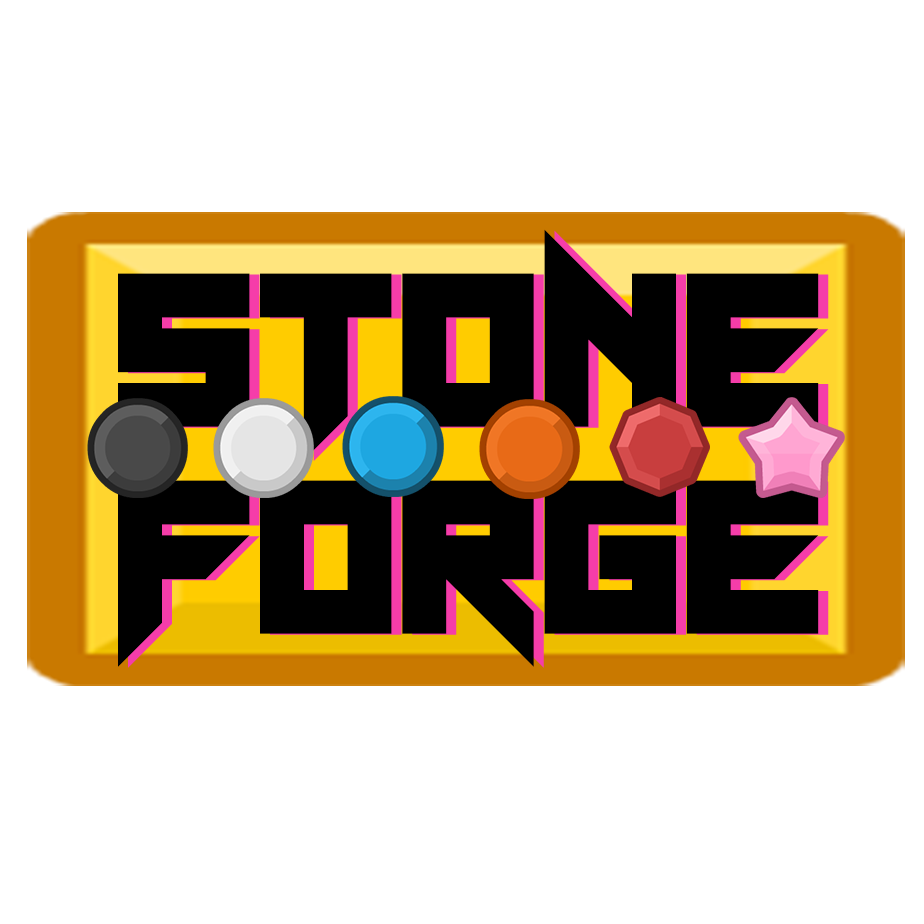
<style>
.page{position:relative;width:924px;height:924px;background:#ffffff}
.page>*{position:absolute;margin:0}
.t1{font:224px/207px "NeonVampire";color:#000000}
</style>
<div class="page">
<p class="t1" style="left:118px;top:229px;width:701px;height:438px;text-align:center">STONE<br>FORGE</p>
</div>
